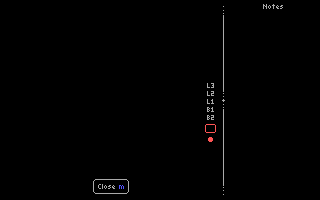
<style>
.page{position:relative;width:320px;height:200px;background:#000000}
.page>*{position:absolute;margin:0}
.t1{font:8px "Vaticanus";color:#aaaaaa}
.t2{font:8px/8px "Vaticanus";color:#aaaaaa}
</style>
<div class="page">
<p class="t1" style="left:263px;top:4px;width:20px;height:5px">Notes</p>
<p class="t2" style="left:207px;top:83px;width:7px;height:37px;text-align:center">L3<br>L2<br>L1<br>B1<br>B2</p>
</div>
